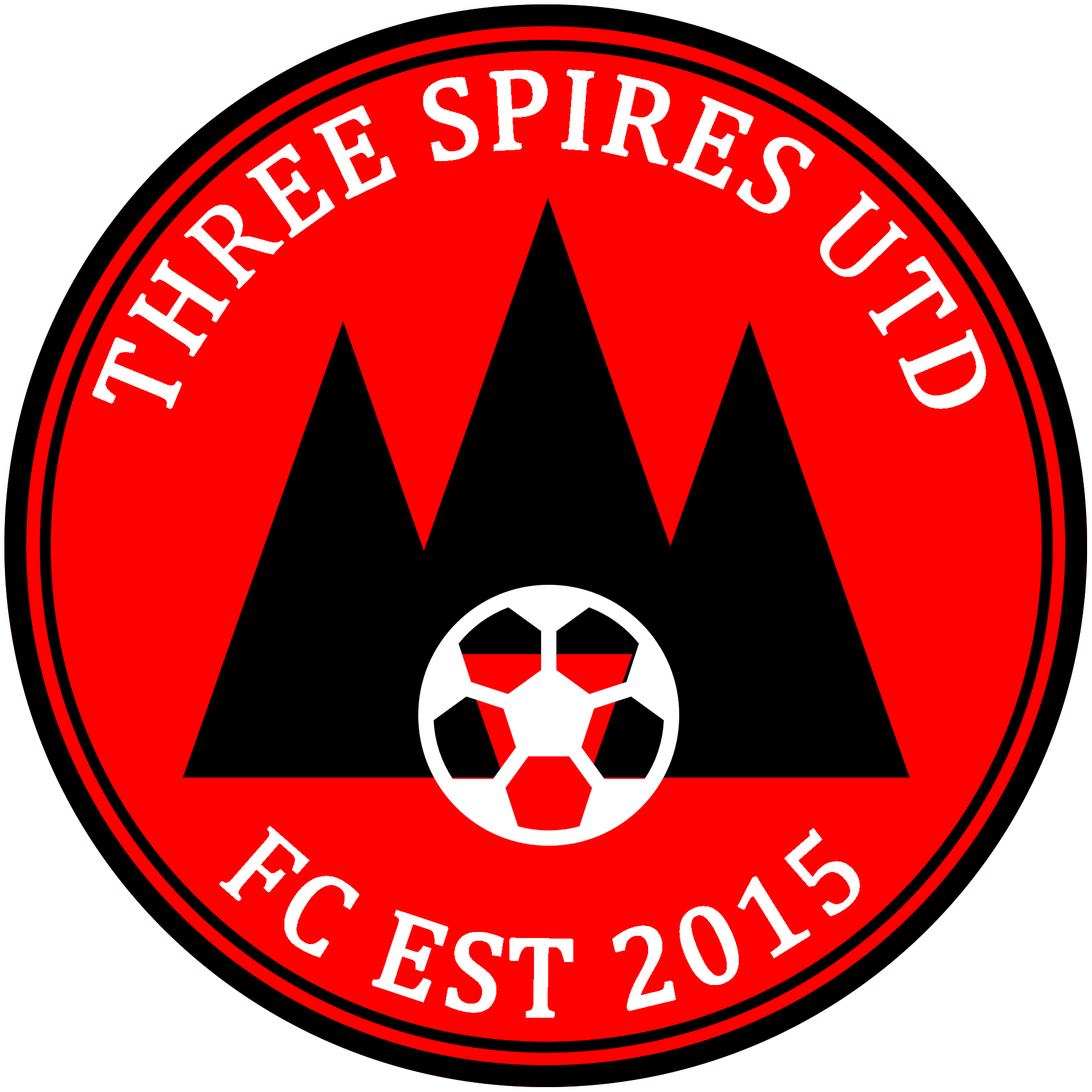
<style>
.page{position:relative;width:1092px;height:1092px;background:#ff0000}
.page>*{position:absolute;margin:0}
.t1{font:113.7px "CambriaMath";color:#ffffff;font-weight:bold}
.t2{font:113.7px "CambriaMath";letter-spacing:0.075em;color:#ffffff;font-weight:bold}
</style>
<div class="page">
<p class="t1" style="left:92px;top:69px;width:894px;height:340px;text-align:center">THREE SPIRES UTD</p>
<p class="t2" style="left:219px;top:826px;width:641px;height:192px">FC EST 2015</p>
</div>
